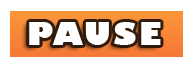
<style>
.page{position:relative;width:193px;height:67px;background:#ffffff}
.page>*{position:absolute;margin:0}
.t1{font:30.5px "GillSans-UltraBold";letter-spacing:0.1em;color:#ffffff}
</style>
<div class="page">
<p class="t1" style="left:29px;top:22px;width:132px;height:23px">PAUSE</p>
</div>
